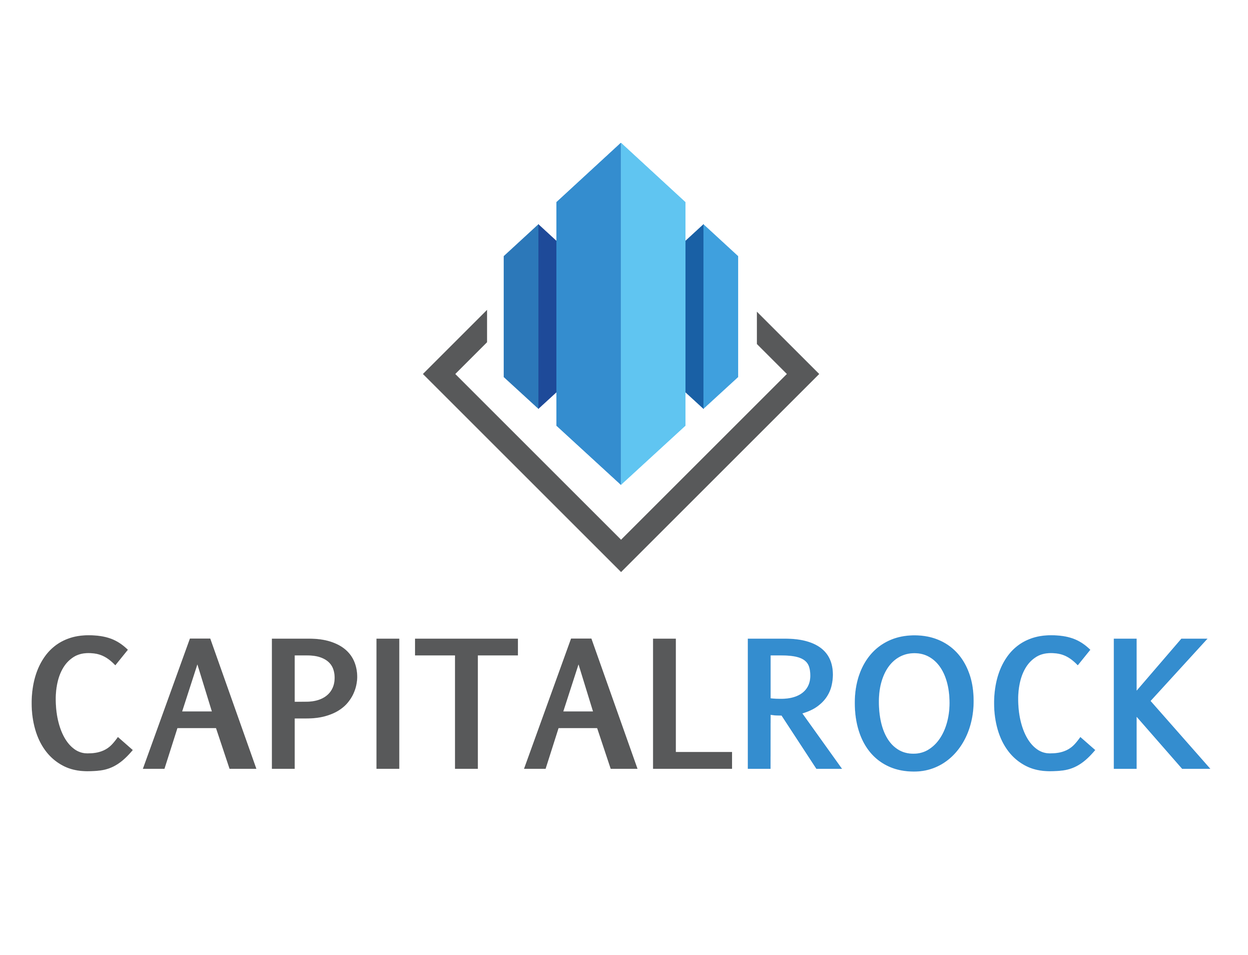
<style>
.page{position:relative;width:1248px;height:955px;background:#ffffff}
.page>*{position:absolute;margin:0}
.t1{font:170.2px "EuphemiaUCAS-Bold";color:#58595a}
.t2{font:170.2px "EuphemiaUCAS-Bold";color:#348dcf}
</style>
<div class="page">
<p class="t1" style="left:31px;top:635px;width:1179px;height:137px">CAPITAL<span class="t2">ROCK</span></p>
</div>
